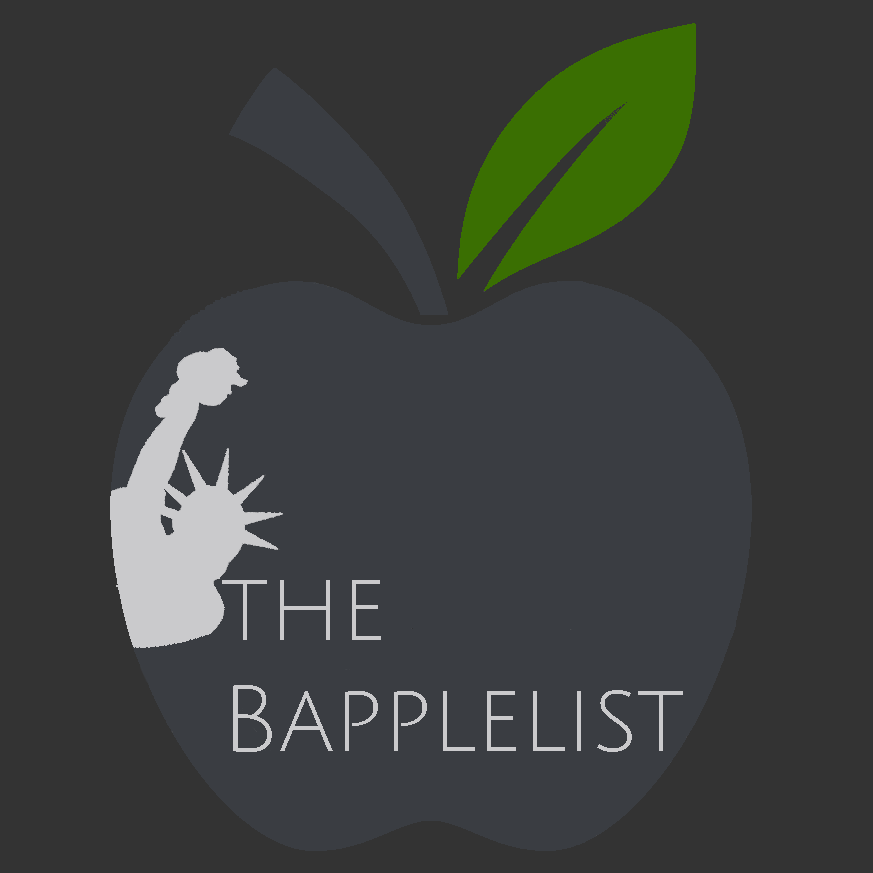
<style>
.page{position:relative;width:873px;height:873px;background:#333333}
.page>*{position:absolute;margin:0}
.t1{font:92.3px "JuliusSansOne-Regular";color:#cacacc}
</style>
<div class="page">
<p class="t1" style="left:222px;top:580px;width:461px;height:172px;text-align:right">the<br>Bapplelist</p>
</div>
